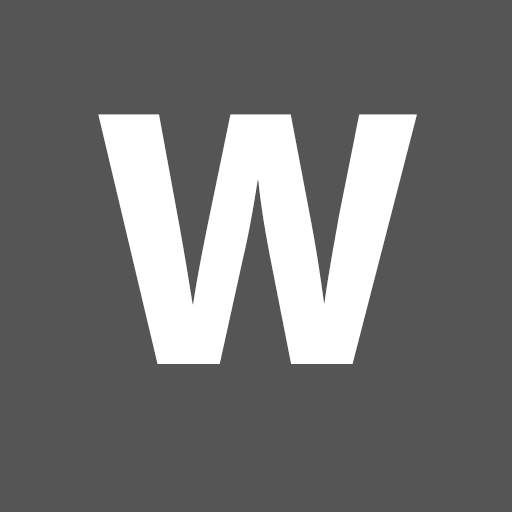
<style>
.page{position:relative;width:512px;height:512px;background:#555555}
.page>*{position:absolute;margin:0}
.t1{font:370px "MyriadPro-Bold";color:#ffffff}
</style>
<div class="page">
<p class="t1" style="left:98px;top:114px;width:319px;height:250px">W</p>
</div>
